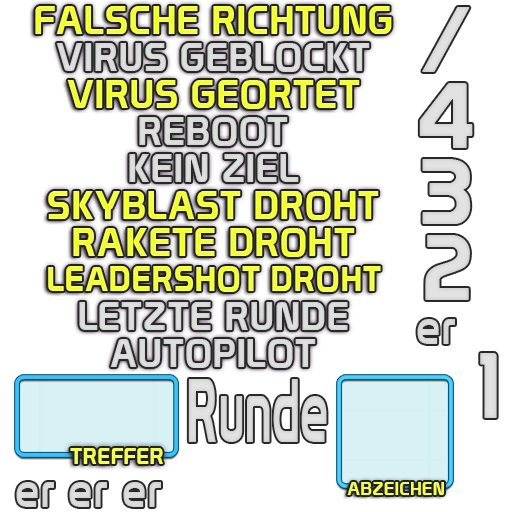
<style>
.page{position:relative;width:512px;height:512px;background:#ffffff}
.page>*{position:absolute;margin:0}
.t1{font:38.5px "Prototype";letter-spacing:0.03em}
.t2{font:38.5px "Prototype";letter-spacing:0.03em;color:#dbdbdb}
.t3{font:33.6px "Prototype";letter-spacing:0.03em}
.t4{font:47.3px "Prototype";letter-spacing:0.03em;color:#d8d8d8;scale:0.87 1}
.t5{font:90px "Prototype";letter-spacing:0.03em;color:#dfdfdf}
.t6{font:22px "Prototype";letter-spacing:0.03em;color:#f4ff52}
.t7{font:18px "Prototype";letter-spacing:0.03em;color:#f4ff4c}
</style>
<div class="page">
<p class="t1" style="left:35px;top:6px;width:357px;height:28px">FALSCHE RICHTUNG</p>
<p class="t2" style="left:56px;top:43px;width:314px;height:29px">VIRUS GEBLOCKT</p>
<p class="t1" style="left:67px;top:80px;width:293px;height:29px">VIRUS GEORTET</p>
<p class="t2" style="left:139px;top:117px;width:149px;height:29px">REBOOT</p>
<p class="t2" style="left:129px;top:154px;width:170px;height:28px">KEIN ZIEL</p>
<p class="t1" style="left:48px;top:191px;width:331px;height:29px">SKYBLAST DROHT</p>
<p class="t1" style="left:73px;top:228px;width:282px;height:29px">RAKETE DROHT</p>
<p class="t3" style="left:48px;top:266px;width:333px;height:26px">LEADERSHOT DROHT</p>
<p class="t2" style="left:79px;top:302px;width:269px;height:28px">LETZTE RUNDE</p>
<p class="t4" style="left:417px;top:319px;width:38px;height:25px">er</p>
<p class="t2" style="left:110px;top:339px;width:206px;height:29px">AUTOPILOT</p>
<p class="t5" style="left:480px;top:353px;width:17px;height:65px">1</p>
<p class="t6" style="left:70px;top:448px;width:93px;height:16px">TREFFER</p>
<p class="t4" style="left:16px;top:482px;width:38px;height:25px">er</p>
<p class="t4" style="left:69px;top:482px;width:38px;height:25px">er</p>
<p class="t4" style="left:123px;top:482px;width:38px;height:25px">er</p>
<p class="t7" style="left:347px;top:482px;width:97px;height:13px">ABZEICHEN</p>
</div>
